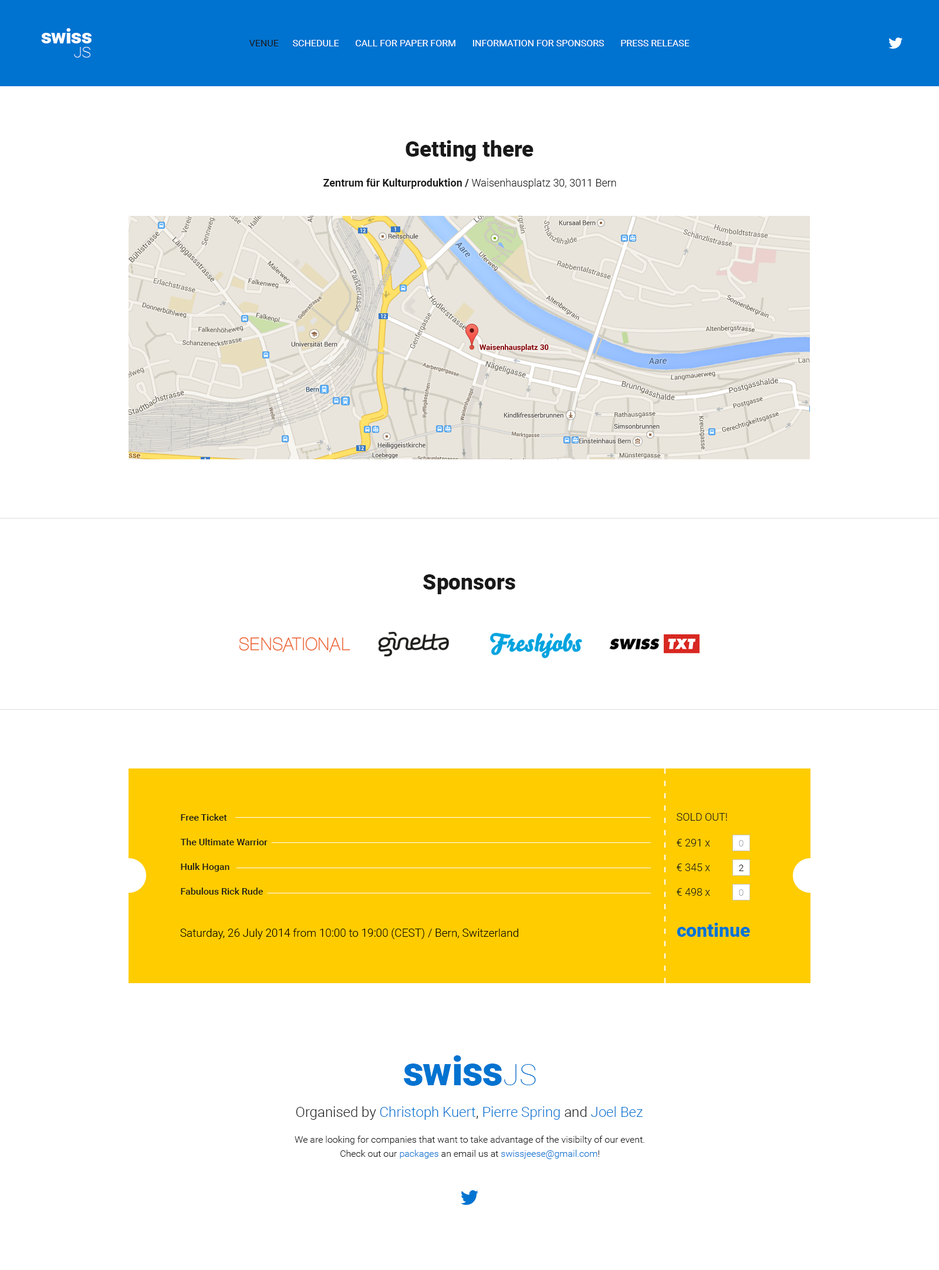
<style>
.page{position:relative;width:939px;height:1270px;background:#ffffff}
.page>*{position:absolute;margin:0}
.t1{font:20.3px "Roboto-Black";letter-spacing:-0.01em;color:#ffffff}
.t2{font:20.3px "Roboto-Black";letter-spacing:-0.02em;color:#ffffff}
.t3{font:20.3px "Roboto-Black";color:#ffffff}
.t4{font:9.4px "Roboto-Regular";color:#ffffff;text-transform:uppercase}
.t5{font:9.4px "Roboto-Regular";color:#191919;text-transform:uppercase}
.t6{font:15px "Roboto-Thin";color:#ffffff}
.t7{font:21.7px "Roboto-Black";color:#191919}
.t8{font:10.6px "Roboto-Bold";color:#191919}
.t9{font:10.6px "Roboto-Light";color:#191919}
.t10{font:9.4px/24.6px "Roboto-Medium";color:#191919}
.t11{font:10.6px "Roboto-Light";color:#191919;text-transform:uppercase}
.t12{font:10.6px/24.6px "Roboto-Light";color:#191919}
.t13{font:9.4px "Roboto-Light";color:#a9afb3}
.t14{font:9.4px "Roboto-Light";color:#191919}
.t15{font:11.1px "Roboto-Light";color:#000000}
.t16{font:18.8px "Roboto-Black";color:#0074d0}
.t17{font:40px "Roboto-Black";letter-spacing:-0.01em;color:#0073d0}
.t18{font:40px "Roboto-Black";letter-spacing:-0.02em;color:#0073d0}
.t19{font:40px "Roboto-Black";color:#0073d0}
.t20{font:29.6px "Roboto-Thin";color:#0073d0}
.t21{font:14.1px "Roboto-Light";color:#0073d0}
.t22{font:14.1px "Roboto-Light";color:#191919}
.t23{font:9.4px/14.1px "Roboto-Light";color:#191919}
.t24{font:9.4px/14.1px "Roboto-Light";color:#0073d0}
</style>
<div class="page">
<p class="t1" style="left:41px;top:28px;width:51px;height:15px"><span class="t2">s</span><span class="t3">w</span>is<span class="t3">s</span></p>
<p class="t4" style="left:249px;top:40px;width:440px;height:6px"><span class="t5">Venue</span>      Schedule       Call for paper form       Information for sponsors       Press release</p>
<p class="t6" style="left:74px;top:47px;width:16px;height:10px">JS</p>
<p class="t7" style="left:405px;top:140px;width:128px;height:21px">Getting there</p>
<p class="t8" style="left:323px;top:178px;width:293px;height:11px">Zentrum für Kulturproduktion / <span class="t9">Waisenhausplatz 30, 3011 Bern</span></p>
<p class="t7" style="left:423px;top:574px;width:92px;height:20px">Sponsors</p>
<p class="t10" style="left:180px;top:814px;width:88px;height:81px">Free Ticket<br>The Ultimate Warrior<br>Hulk Hogan<br>Fabulous Rick Rude</p>
<p class="t11" style="left:676px;top:813px;width:51px;height:8px">Sold out!</p>
<p class="t12" style="left:676px;top:839px;width:34px;height:57px">€ 291 x<br>€ 345 x<br>€ 498 x</p>
<p class="t13" style="left:739px;top:840px;width:4px;height:7px">0</p>
<p class="t14" style="left:739px;top:865px;width:4px;height:6px">2</p>
<p class="t13" style="left:739px;top:889px;width:4px;height:7px">0</p>
<p class="t15" style="left:180px;top:928px;width:338px;height:11px">Saturday, 26 July 2014 from 10:00 to 19:00 (CEST) / Bern, Switzerland</p>
<p class="t16" style="left:676px;top:923px;width:74px;height:14px">continue</p>
<p class="t17" style="left:404px;top:1056px;width:98px;height:30px"><span class="t18">s</span><span class="t19">w</span>is<span class="t19">s</span></p>
<p class="t20" style="left:504px;top:1064px;width:32px;height:21px">JS</p>
<p class="t21" style="left:296px;top:1107px;width:347px;height:13px"><span class="t22">Organised by </span>Christoph Kuert<span class="t22">, </span>Pierre Spring<span class="t22"> and </span>Joel Bez</p>
<p class="t23" style="left:295px;top:1136px;width:349px;height:23px;text-align:center">We are looking for companies that want to take advantage of the visibilty of our event.<br>Check out our <span class="t24">packages</span> an email us at <span class="t24">swissjeese@gmail.com</span>!</p>
</div>
